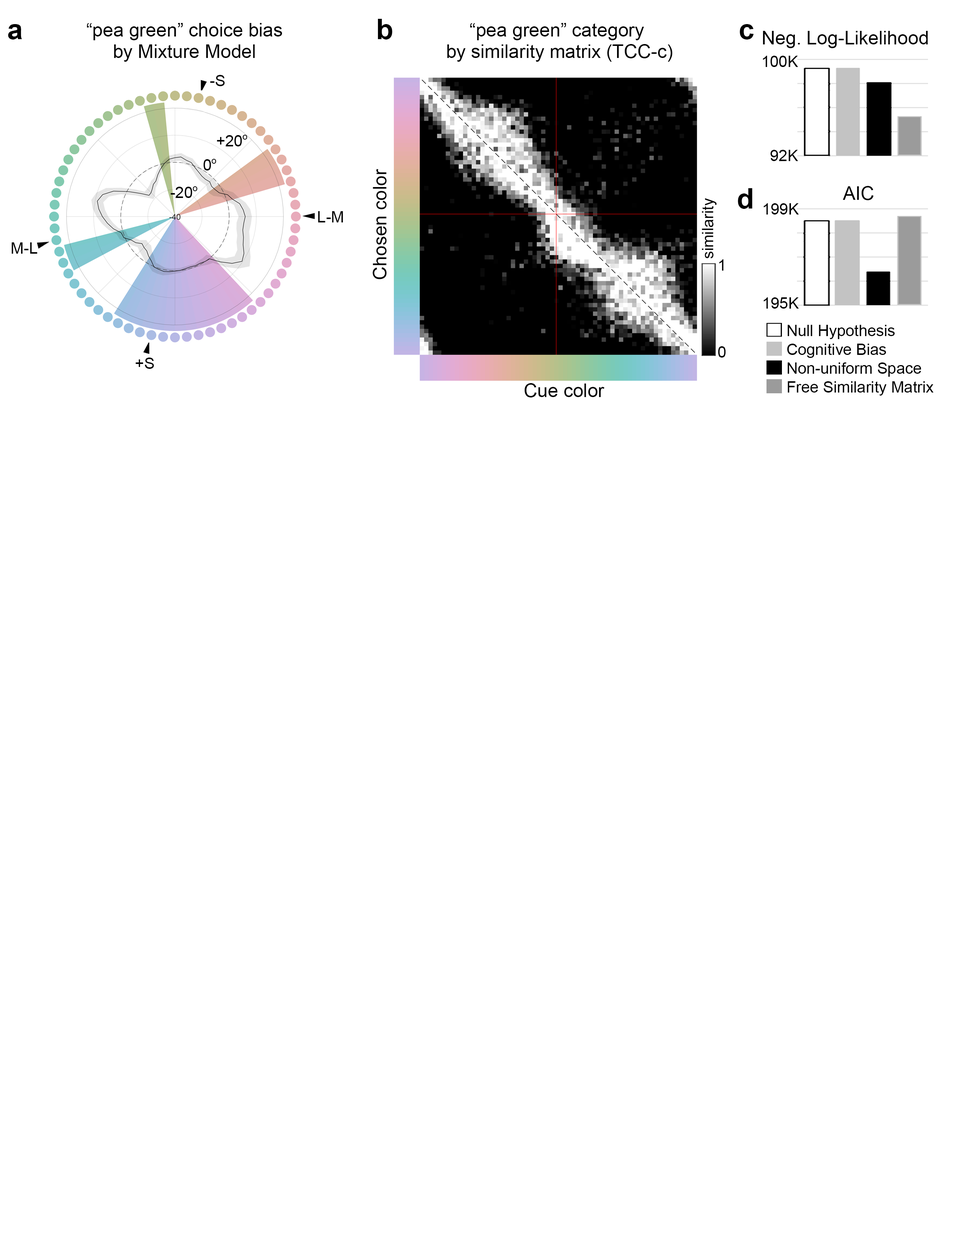
<style>
.page{position:relative;width:960px;height:1242px;background:#ffffff}
.page>*{position:absolute;margin:0}
.t1{font:18.8px/21.8px "ArialMT";color:#000000}
.t2{font:18.8px "ArialMT";color:#000000}
.t3{font:15.7px "ArialMT";color:#000000}
.t4{font:15.7px/21.8px "ArialMT";color:#000000}
</style>
<div class="page">
<p class="t1" style="left:87px;top:23px;width:195px;height:39px;text-align:center">“pea green” choice bias<br>by Mixture Model</p>
<p class="t1" style="left:447px;top:23px;width:225px;height:39px;text-align:center">“pea green” category <br>by similarity matrix (TCC-c)</p>
<p class="t2" style="left:763px;top:31px;width:165px;height:17px">Neg. Log-Likelihood</p>
<p class="t3" style="left:763px;top:56px;width:35px;height:105px;text-align:right">100K<br><br><br><br><br>92K</p>
<p class="t3" style="left:210px;top:75px;width:15px;height:11px">-S</p>
<p class="t3" style="left:217px;top:135px;width:30px;height:11px">+20o</p>
<p class="t3" style="left:203px;top:159px;width:13px;height:12px">0o</p>
<p class="t2" style="left:373px;top:169px;width:14px;height:110px;rotate:-90deg">Chosen color</p>
<p class="t2" style="left:843px;top:186px;width:31px;height:14px">AIC</p>
<p class="t3" style="left:171px;top:186px;width:27px;height:12px">-20o</p>
<p class="t3" style="left:702px;top:198px;width:15px;height:61px;rotate:-90deg">similarity</p>
<p class="t3" style="left:763px;top:203px;width:36px;height:106px;text-align:right">199K<br><br><br><br><br>195K</p>
<p class="t3" style="left:318px;top:211px;width:25px;height:11px">L-M</p>
<p class="t3" style="left:12px;top:242px;width:25px;height:12px">M-L</p>
<p class="t4" style="left:718px;top:259px;width:8px;height:99px">1<br><br><br><br>0</p>
<p class="t3" style="left:787px;top:325px;width:147px;height:71px">Null Hypothesis<br>Cognitive Bias<br>Non-uniform Space<br>Free Similarity Matrix</p>
<p class="t3" style="left:136px;top:358px;width:18px;height:11px">+S</p>
<p class="t2" style="left:524px;top:383px;width:81px;height:15px">Cue color</p>
</div>
